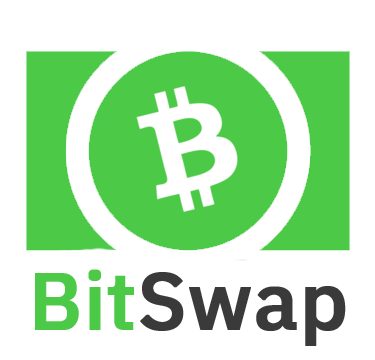
<style>
.page{position:relative;width:375px;height:360px;background:#ffffff}
.page>*{position:absolute;margin:0}
.t1{font:80px "IBMPlexSans-Medium";color:#3a3a3a;font-weight:bold}
.t2{font:80px "IBMPlexSans-Medium";color:#4cca47;font-weight:bold}
</style>
<div class="page">
<p class="t1" style="left:35px;top:269px;width:311px;height:77px"><span class="t2">Bit</span>Swap</p>
</div>
